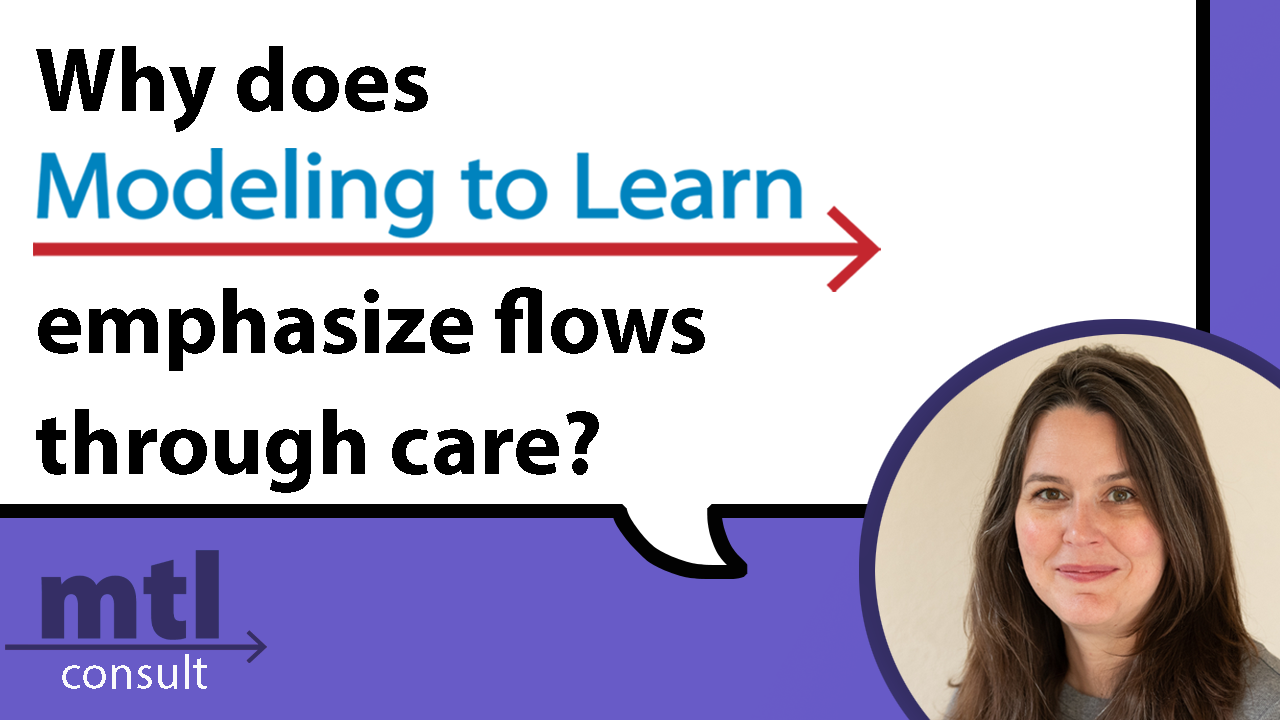
<style>
.page{position:relative;width:1280px;height:720px;background:#ffffff}
.page>*{position:absolute;margin:0}
.t1{font:91.7px "MyriadPro-Bold";color:#000000}
</style>
<div class="page">
<p class="t1" style="left:36px;top:46px;width:669px;height:447px">Why does <br><br>emphasize flows <br>through care?</p>
</div>
